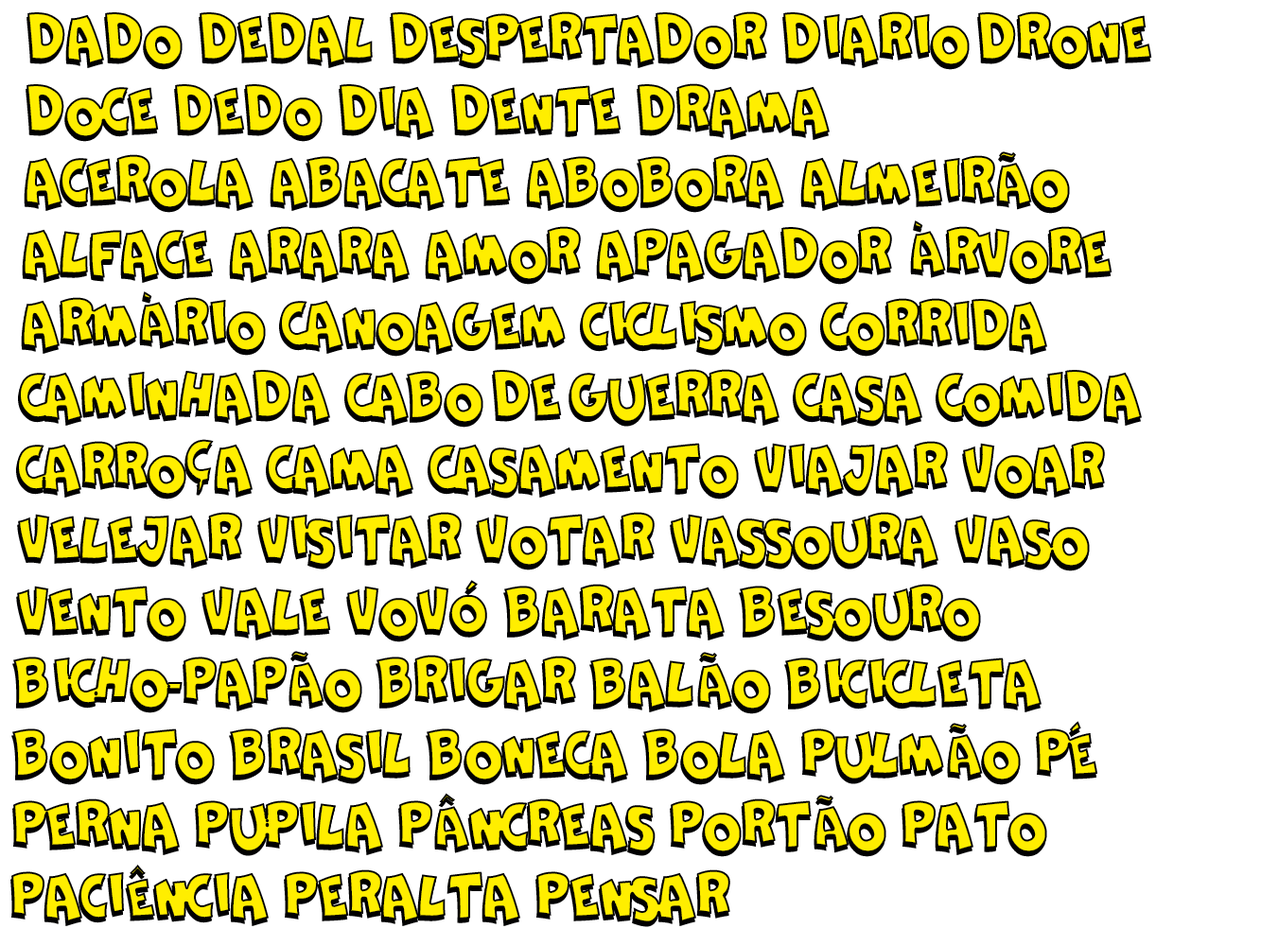
<style>
.page{position:relative;width:1261px;height:946px;background:#ffffff}
.page>*{position:absolute;margin:0}
.t1{font:59.6px "ComicaBDBold";letter-spacing:-0.1em;color:#ffee00;text-transform:uppercase;scale:0.95 1}
</style>
<div class="page">
<p class="t1" style="left:11px;top:11px;width:1141px;height:912px">dado  dedal  despertador  diario drone  doce  dedo  dia  dente  drama<br>acerola  abacate  abobora  almeirão  alface  arara  amor  apagador  árvore  armário  canoagem  ciclismo  corrida  caminhada  cabo de guerra  casa  comida  carroça  cama  casamento  viajar  voar  velejar  visitar  votar  vassoura  vaso  vento  vale  vovó  barata  besouro  bicho-papão  brigar  balão  bicicleta  bonito  brasil  boneca  bola  pulmão  pé  perna  pupila  pâncreas  portão  pato  paciência  peralta  pensar</p>
</div>
